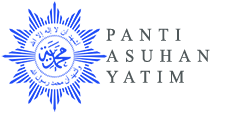
<style>
.page{position:relative;width:225px;height:115px;background:#ffffff}
.page>*{position:absolute;margin:0}
.t1{font:17.5px "IskoolaPota";letter-spacing:0.4em;color:#50585a;scale:0.96 1}
</style>
<div class="page">
<p class="t1" style="left:106px;top:28px;width:104px;height:55px">PANTI<br>ASUHAN<br>YATIM</p>
</div>
